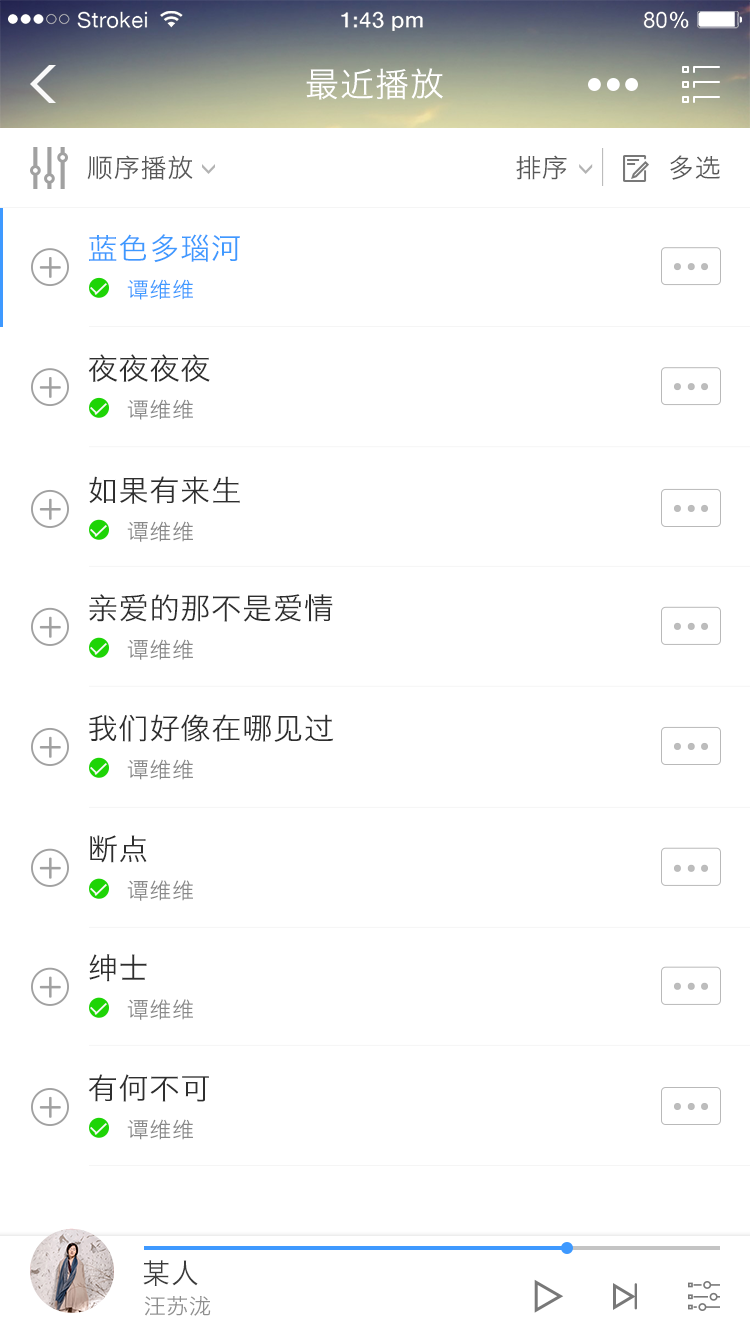
<style>
.page{position:relative;width:750px;height:1334px;background:#ffffff}
.page>*{position:absolute;margin:0}
.t1{font:33.9px "HiraginoSansGB-W3";letter-spacing:0.03em;color:#ffffff}
.t2{font:26px "HiraginoSansGB-W3";letter-spacing:0.03em;color:#575757}
.t3{font:29.8px "HiraginoSansGB-W3";letter-spacing:0.03em;color:#3e99ff}
.t4{font:21.8px "HiraginoSansGB-W3";letter-spacing:0.03em;color:#3e99ff}
.t5{font:29.8px "HiraginoSansGB-W3";letter-spacing:0.03em;color:#2e2e2e}
.t6{font:21.8px "HiraginoSansGB-W3";letter-spacing:0.03em;color:#888888}
.t7{font:29.9px "HiraginoSansGB-W3";letter-spacing:0.03em;color:#2e2e2e}
.t8{font:21.9px "HiraginoSansGB-W3";letter-spacing:0.03em;color:#888888}
.t9{font:30px "HiraginoSansGB-W3";letter-spacing:0.03em;color:#2e2e2e}
.t10{font:22px "HiraginoSansGB-W3";letter-spacing:0.03em;color:#888888}
.t11{font:30.1px "HiraginoSansGB-W3";letter-spacing:0.03em;color:#2e2e2e}
.t12{font:22.1px "HiraginoSansGB-W3";letter-spacing:0.03em;color:#888888}
.t13{font:28px "HiraginoSansGB-W3";letter-spacing:0.03em;color:#3b3b3b}
.t14{font:22px "HiraginoSansGB-W3";letter-spacing:0.03em;color:#8f8f8f}
</style>
<div class="page">
<p class="t1" style="left:306px;top:68px;width:137px;height:32px">最近播放</p>
<p class="t2" style="left:87px;top:155px;width:106px;height:25px">顺序播放</p>
<p class="t2" style="left:516px;top:155px;width:51px;height:25px">排序</p>
<p class="t2" style="left:670px;top:155px;width:50px;height:25px">多选</p>
<p class="t3" style="left:89px;top:234px;width:151px;height:29px">蓝色多瑙河</p>
<p class="t4" style="left:127px;top:279px;width:66px;height:21px">谭维维</p>
<p class="t5" style="left:88px;top:354px;width:122px;height:28px">夜夜夜夜</p>
<p class="t6" style="left:127px;top:399px;width:66px;height:21px">谭维维</p>
<p class="t7" style="left:89px;top:476px;width:151px;height:28px">如果有来生</p>
<p class="t8" style="left:127px;top:521px;width:66px;height:21px">谭维维</p>
<p class="t9" style="left:89px;top:594px;width:244px;height:28px">亲爱的那不是爱情</p>
<p class="t10" style="left:127px;top:639px;width:66px;height:21px">谭维维</p>
<p class="t7" style="left:89px;top:714px;width:245px;height:28px">我们好像在哪见过</p>
<p class="t8" style="left:127px;top:759px;width:66px;height:21px">谭维维</p>
<p class="t11" style="left:90px;top:835px;width:57px;height:28px">断点</p>
<p class="t10" style="left:127px;top:880px;width:66px;height:21px">谭维维</p>
<p class="t11" style="left:89px;top:954px;width:58px;height:28px">绅士</p>
<p class="t12" style="left:127px;top:999px;width:66px;height:21px">谭维维</p>
<p class="t7" style="left:88px;top:1074px;width:121px;height:28px">有何不可</p>
<p class="t8" style="left:127px;top:1119px;width:66px;height:21px">谭维维</p>
<p class="t13" style="left:143px;top:1260px;width:55px;height:26px">某人</p>
<p class="t14" style="left:144px;top:1296px;width:67px;height:20px">汪苏泷</p>
</div>
